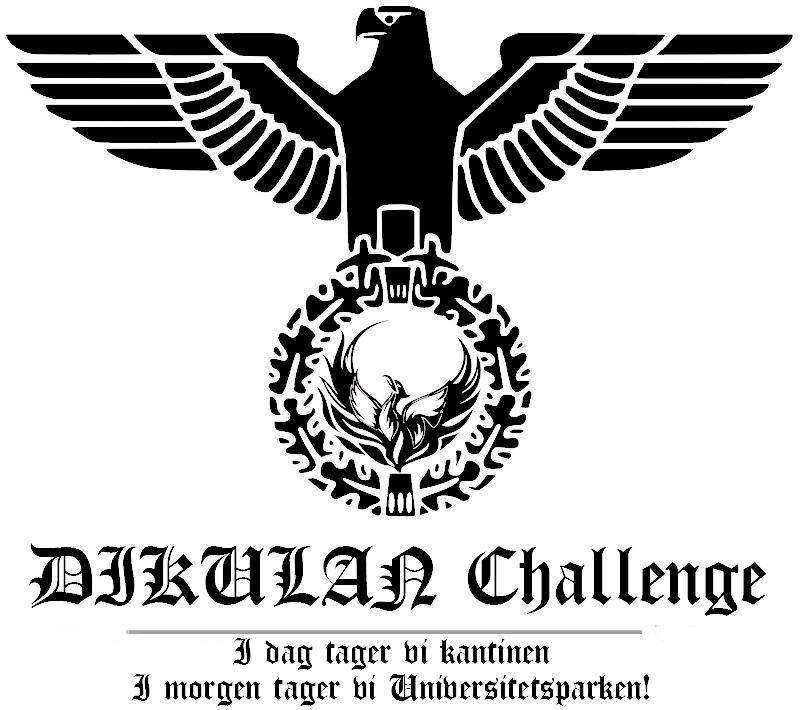
<style>
.page{position:relative;width:800px;height:710px;background:#ffffff}
.page>*{position:absolute;margin:0}
.t1{font:90px "Iglesia-Light";color:#000000}
.t2{font:40px/36px "Iglesia-Light";color:#000000}
</style>
<div class="page">
<p class="t1" style="left:29px;top:543px;width:738px;height:73px">DIKULAN Challenge</p>
<p class="t2" style="left:132px;top:638px;width:518px;height:68px;text-align:center">I dag tager vi kantinen<br>I morgen tager vi Universitetsparken!</p>
</div>
